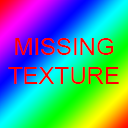
<style>
.page{position:relative;width:128px;height:128px}
.page>*{position:absolute;margin:0}
.t1{font:24px "ArialMT";color:#ff0000}
</style>
<div class="page">
<p class="t1" style="left:8px;top:38px;width:111px;height:46px;text-align:center">MISSING<br>TEXTURE</p>
</div>
